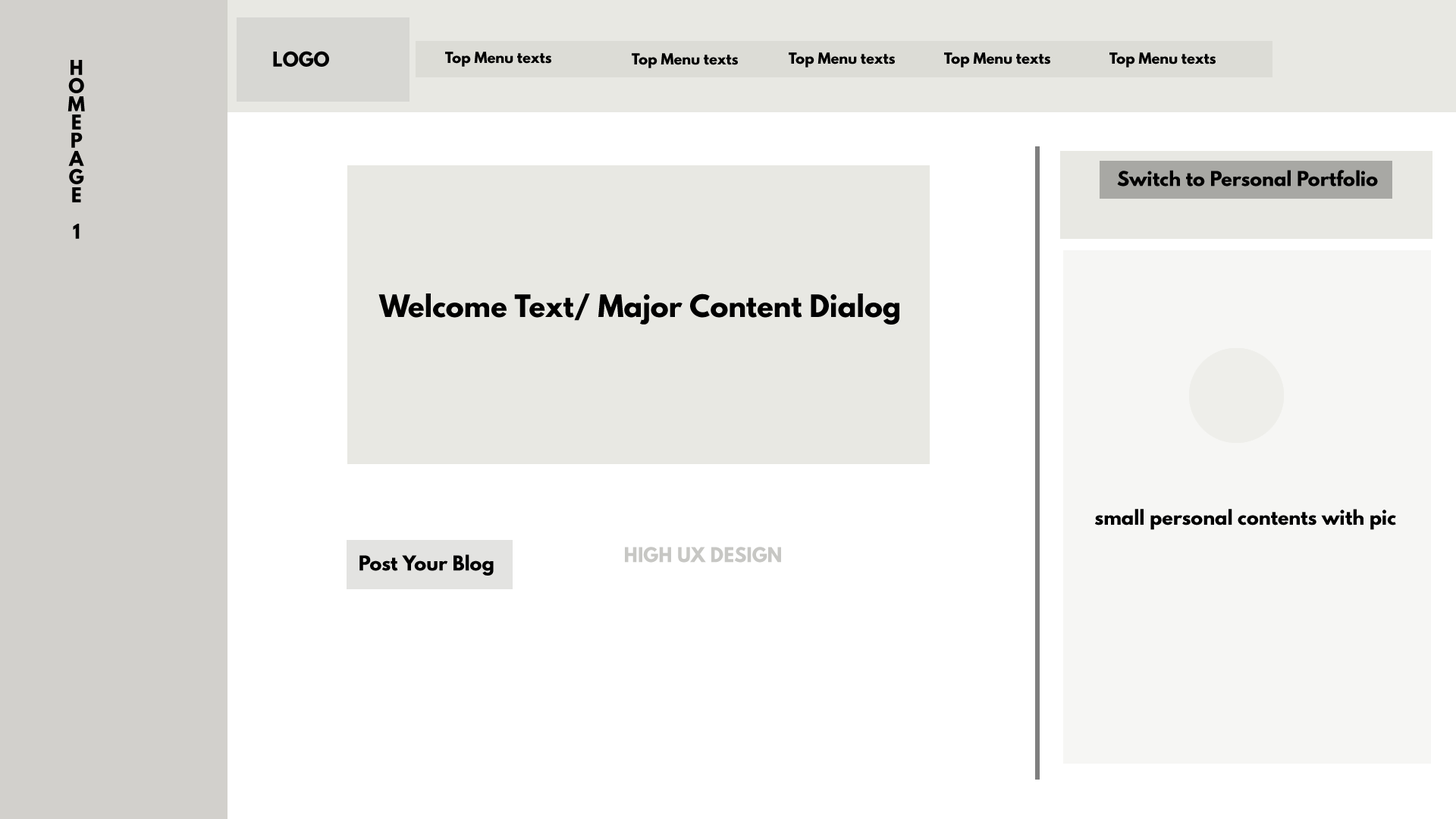
<style>
.page{position:relative;width:1456px;height:819px;background:#ffffff}
.page>*{position:absolute;margin:0}
.t1{font:18.2px "LeagueSpartan-Bold";color:#000000}
.t2{font:13.6px "LeagueSpartan-Bold";color:#000000}
.t3{font:18.2px "LeagueSpartan-Bold";color:#c7c7c4}
</style>
<div class="page">
<p class="t1" style="left:273px;top:51px;width:56px;height:16px">LOGO</p>
<p class="t2" style="left:789px;top:52px;width:106px;height:15px">Top Menu texts</p>
<p class="t1" style="left:67px;top:60px;width:18px;height:179px">HOMEPAGE 1</p>
<p class="t1" style="left:1117px;top:170px;width:261px;height:17px">Switch to Personal Portfolio</p>
<p class="t1" style="left:359px;top:554px;width:135px;height:22px">Post Your Blog</p>
<p class="t3" style="left:625px;top:547px;width:156px;height:16px">HIGH UX DESIGN</p>
</div>
